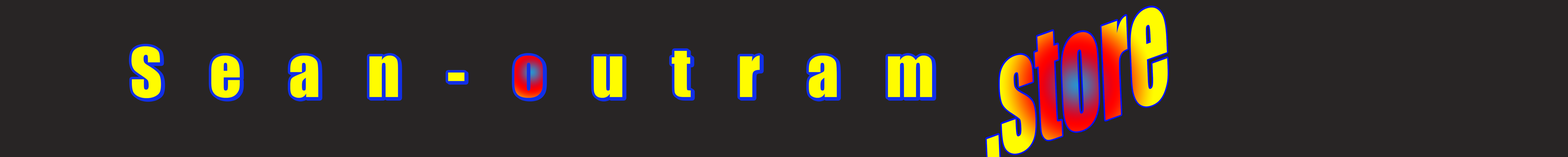
<style>
.page{position:relative;width:1568px;height:157px;background:#282525}
.page>*{position:absolute;margin:0}
.t1{font:62.7px "Impact";letter-spacing:0.75em;color:#fffc00}
</style>
<div class="page">
<p class="t1" style="left:131px;top:46px;width:801px;height:52px">Sean-outram</p>
<p class="t1" style="left:133px;top:47px;width:801px;height:52px">Sean-outram</p>
</div>
